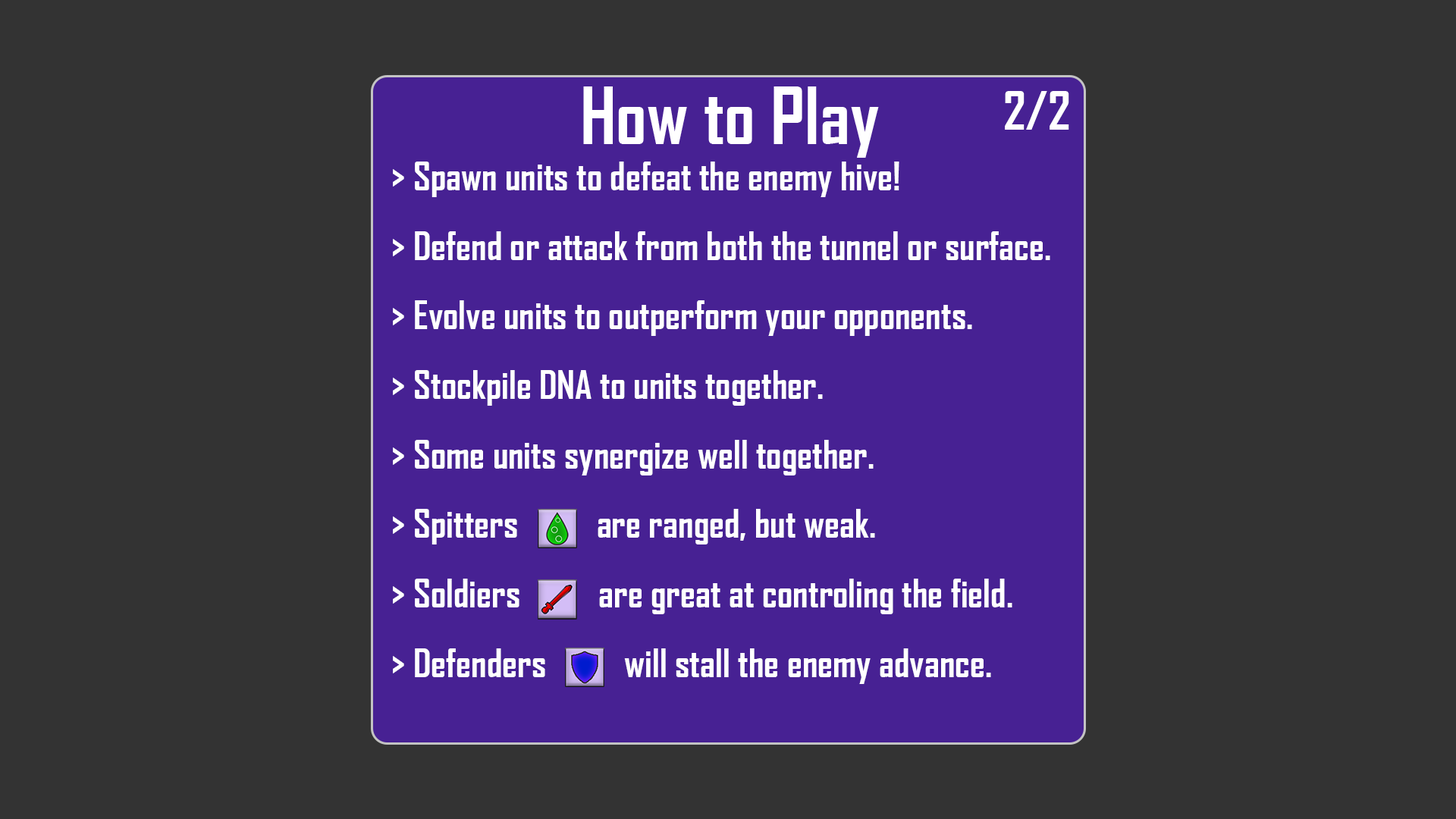
<style>
.page{position:relative;width:1456px;height:819px;background:#333333}
.page>*{position:absolute;margin:0}
.t1{font:50.6px "AgencyFB-Bold";color:#ffffff}
.t2{font:37.9px/69.5px "AgencyFB-Bold";color:#ffffff}
</style>
<div class="page">
<p class="t1" style="left:1005px;top:91px;width:64px;height:39px">2/2</p>
<p class="t2" style="left:393px;top:162px;width:657px;height:522px">&gt; Spawn units to defeat the enemy hive! <br>&gt; Defend or attack from both the tunnel or surface. <br>&gt; Evolve units to outperform your opponents. <br>&gt; Stockpile DNA to units together.<br>&gt; Some units synergize well together.<br>&gt; Spitters          are ranged, but weak.<br>&gt; Soldiers          are great at controling the field.<br>&gt; Defenders          will stall the enemy advance.</p>
</div>
